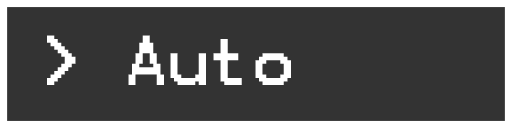
<style>
.page{position:relative;width:512px;height:128px;background:#333333}
.page>*{position:absolute;margin:0}
.t1{font:56.5px "Terminal";color:#ffffff}
</style>
<div class="page">
<p class="t1" style="left:47px;top:35px;width:244px;height:50px">&gt; Auto</p>
</div>
